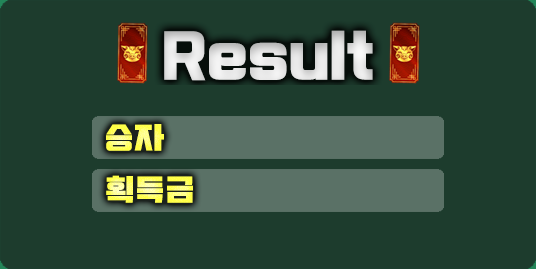
<style>
.page{position:relative;width:536px;height:269px;background:#1d3c2d}
.page>*{position:absolute;margin:0}
.t1{font:30px "Typo_SsangmunDong_B"}
</style>
<div class="page">
<p class="t1" style="left:106px;top:124px;width:58px;height:27px">승자</p>
<p class="t1" style="left:106px;top:175px;width:87px;height:28px">획득금</p>
</div>
